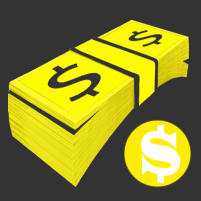
<style>
.page{position:relative;width:201px;height:201px;background:#333333}
.page>*{position:absolute;margin:0}
.t1{font:66.6px "LatinWide";color:#ffffff;scale:0.59 1}
</style>
<div class="page">
<p class="t1" style="left:141px;top:125px;width:40px;height:58px">$</p>
</div>
